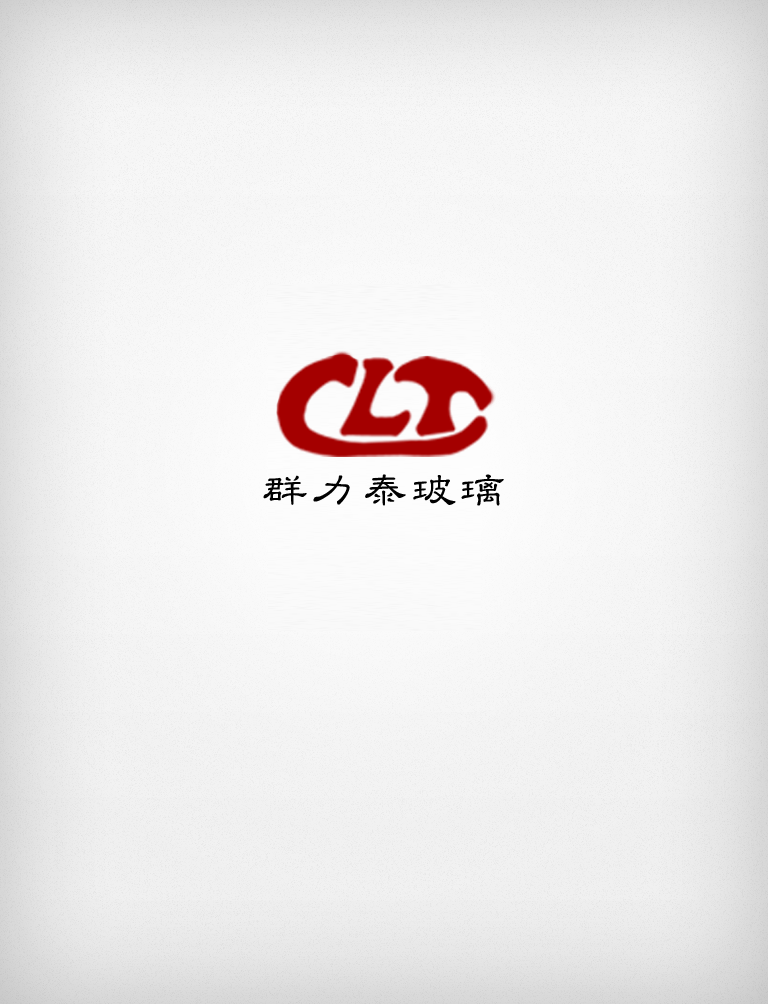
<style>
.page{position:relative;width:768px;height:1004px}
.page>*{position:absolute;margin:0}
.t1{font:48px "DFKuoTaiBeiStd-W4";letter-spacing:0.025em;color:#000000}
</style>
<div class="page">
<p class="t1" style="left:263px;top:474px;width:241px;height:32px">群力泰玻璃</p>
</div>
